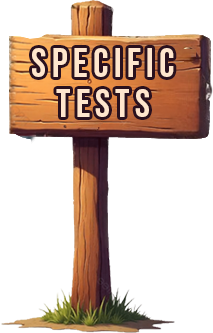
<style>
.page{position:relative;width:213px;height:333px;background:#ffffff}
.page>*{position:absolute;margin:0}
.t1{font:40.6px "BebasNeue-Regular";letter-spacing:0.13em;color:#ffe6cd}
.t2{font:40px "BebasNeue-Regular";letter-spacing:0.13em;color:#ffe6cd}
</style>
<div class="page">
<p class="t1" style="left:32px;top:48px;width:142px;height:29px">specific</p>
<p class="t2" style="left:56px;top:89px;width:93px;height:28px">tests</p>
</div>
